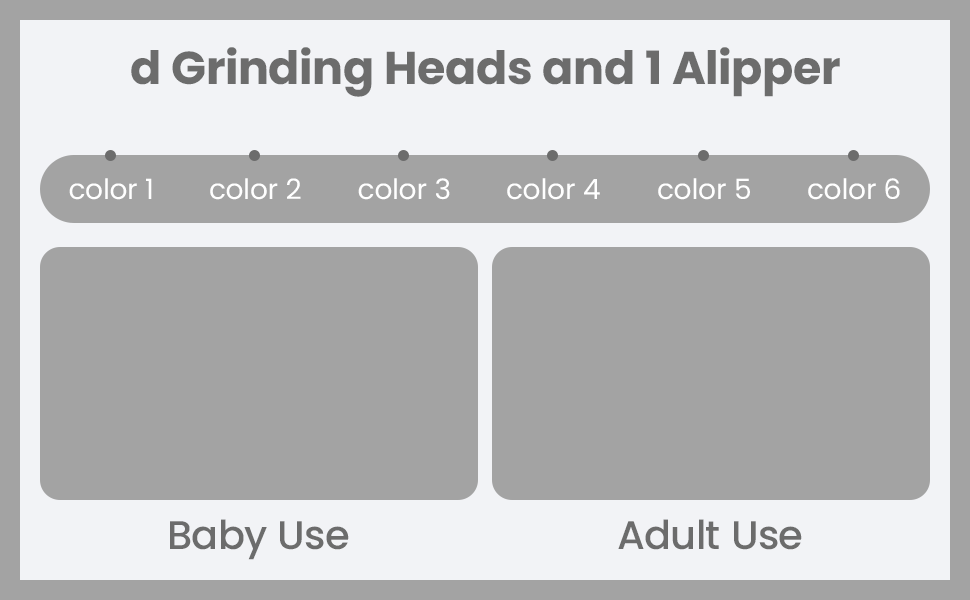
<style>
.page{position:relative;width:970px;height:600px;background:#a3a3a3}
.page>*{position:absolute;margin:0}
.t1{font:46px "Poppins-Bold";color:#6c6c6c}
.t2{font:28px "Poppins-Regular";color:#ffffff}
.t3{font:40px "Poppins-Medium";color:#6c6c6c}
</style>
<div class="page">
<p class="t1" style="left:131px;top:47px;width:709px;height:50px">d Grinding Heads and 1 Alipper</p>
<p class="t2" style="left:69px;top:178px;width:83px;height:22px">color 1</p>
<p class="t2" style="left:210px;top:178px;width:91px;height:22px">color 2</p>
<p class="t2" style="left:358px;top:178px;width:92px;height:22px">color 3</p>
<p class="t2" style="left:507px;top:178px;width:93px;height:22px">color 4</p>
<p class="t2" style="left:658px;top:178px;width:92px;height:22px">color 5</p>
<p class="t2" style="left:808px;top:178px;width:92px;height:22px">color 6</p>
<p class="t3" style="left:170px;top:519px;width:179px;height:41px">Baby Use</p>
<p class="t3" style="left:618px;top:519px;width:184px;height:31px">Adult Use</p>
</div>
